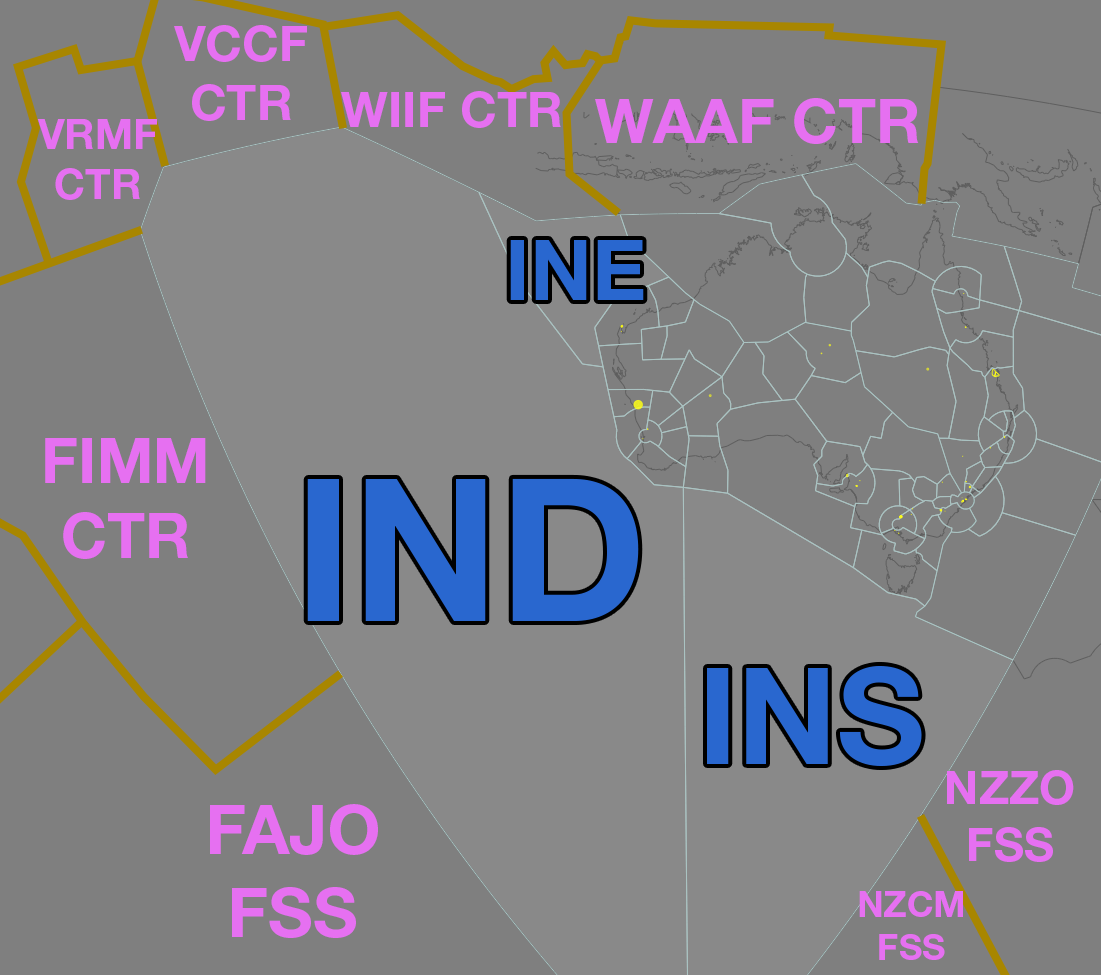
<style>
.page{position:relative;width:1101px;height:975px;background:#7f7f7f}
.page>*{position:absolute;margin:0}
.t1{font:49.6px "HelveticaNeueLTStd-Bd";color:#e670f1}
.t2{font:62.2px "HelveticaNeueLTStd-Bd";color:#e670f1}
.t3{font:42px "HelveticaNeueLTStd-Bd";color:#e670f1}
.t4{font:83.8px "HelveticaNeueLTStd-Bd";color:#2967cf}
.t5{font:62.5px "HelveticaNeueLTStd-Bd";color:#e670f1}
.t6{font:198.5px "HelveticaNeueLTStd-Bd";color:#2967cf}
.t7{font:134.9px "HelveticaNeueLTStd-Bd";color:#2967cf}
.t8{font:46.8px "HelveticaNeueLTStd-Bd";color:#e670f1}
.t9{font:68.9px "HelveticaNeueLTStd-Bd";color:#e670f1}
.t10{font:35.9px "HelveticaNeueLTStd-Bd";color:#e670f1}
</style>
<div class="page">
<p class="t1" style="left:174px;top:25px;width:133px;height:96px;text-align:center">VCCF<br>CTR</p>
<p class="t1" style="left:341px;top:91px;width:220px;height:37px">WIIF CTR</p>
<p class="t2" style="left:595px;top:98px;width:324px;height:46px">WAAF CTR</p>
<p class="t3" style="left:37px;top:119px;width:120px;height:81px;text-align:center">VRMF<br>CTR</p>
<p class="t4" style="left:510px;top:240px;width:134px;height:60px">INE</p>
<p class="t5" style="left:45px;top:438px;width:161px;height:121px;text-align:center">FIMM<br>CTR</p>
<p class="t6" style="left:307px;top:478px;width:332px;height:143px">IND</p>
<p class="t7" style="left:707px;top:665px;width:215px;height:101px">INS</p>
<p class="t8" style="left:947px;top:770px;width:127px;height:92px;text-align:center">NZZO<br>FSS</p>
<p class="t9" style="left:210px;top:804px;width:168px;height:134px;text-align:center">FAJO<br>FSS</p>
<p class="t10" style="left:859px;top:891px;width:104px;height:69px;text-align:center">NZCM<br>FSS</p>
</div>
